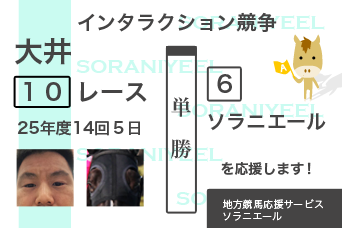
<style>
.page{position:relative;width:342px;height:228px;background:#ffffff}
.page>*{position:absolute;margin:0}
.t1{font:20px "HiraKakuPro-W6";color:#454444}
.t2{font:29px "HiraKakuPro-W6";color:#454444}
.t3{font:20px "CopperplateGothic-Bold";color:#cafbf1}
.t4{font:24px "HiraKakuPro-W6";color:#454444}
.t5{font:21px/580.6px "HiraMinPro-W6";color:#454444}
.t6{font:16px "HiraKakuPro-W6";color:#454444}
.t7{font:14px "HiraKakuPro-W6";color:#454444}
.t8{font:10px/6px "HiraKakuPro-W3";letter-spacing:0.02em;color:#ffffff}
.t9{font:10px/6px "HiraKakuPro-W3";color:#ffffff}
</style>
<div class="page">
<p class="t1" style="left:78px;top:12px;width:199px;height:20px">インタラクション競争</p>
<p class="t2" style="left:15px;top:38px;width:56px;height:27px">大井</p>
<p class="t3" style="left:76px;top:59px;width:147px;height:15px">SORANIYEEL</p>
<p class="t4" style="left:217px;top:74px;width:15px;height:19px">６</p>
<p class="t4" style="left:24px;top:82px;width:37px;height:19px">１０</p>
<p class="t4" style="left:80px;top:82px;width:67px;height:20px">レース</p>
<p class="t5" style="left:171px;top:97px;width:21px;height:62px">単　勝</p>
<p class="t3" style="left:177px;top:103px;width:147px;height:15px">SORANIYEEL</p>
<p class="t1" style="left:208px;top:113px;width:118px;height:18px">ソラニエール</p>
<p class="t6" style="left:17px;top:120px;width:123px;height:16px">25年度14回５日</p>
<p class="t7" style="left:221px;top:162px;width:90px;height:13px">を応援します！</p>
<p class="t8" style="left:223px;top:199px;width:100px;height:22px">地方競馬応援サービス<br><span class="t9"><br>ソラニエール</span></p>
</div>
